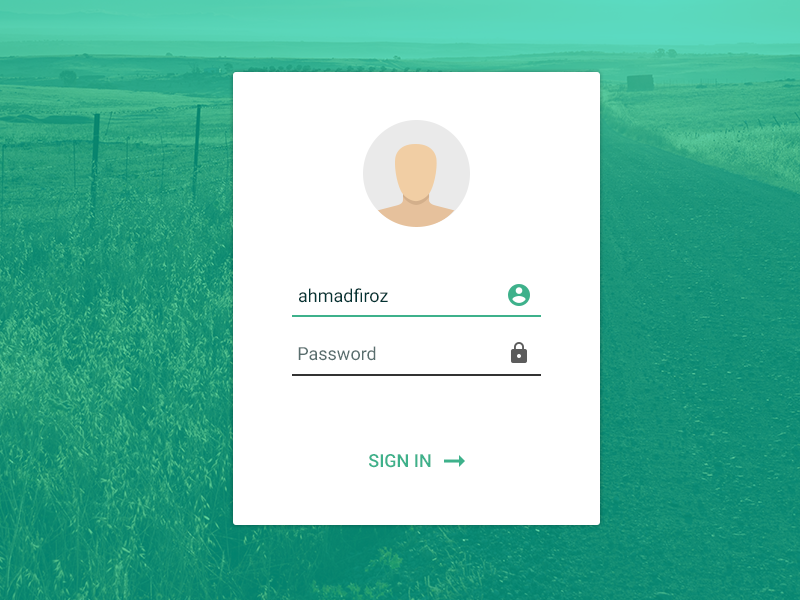
<style>
.page{position:relative;width:800px;height:600px;background:#ffffff}
.page>*{position:absolute;margin:0}
.t1{font:18px "Roboto-Regular";color:#033333}
.t2{font:18px "Roboto-Regular";color:#596e6e}
.t3{font:18px "Roboto-Medium";color:#3eb18b;text-transform:uppercase}
</style>
<div class="page">
<p class="t1" style="left:299px;top:288px;width:89px;height:15px">ahmadfiroz</p>
<p class="t2" style="left:298px;top:346px;width:78px;height:15px">Password</p>
<p class="t3" style="left:369px;top:454px;width:62px;height:14px">Sign In</p>
</div>
